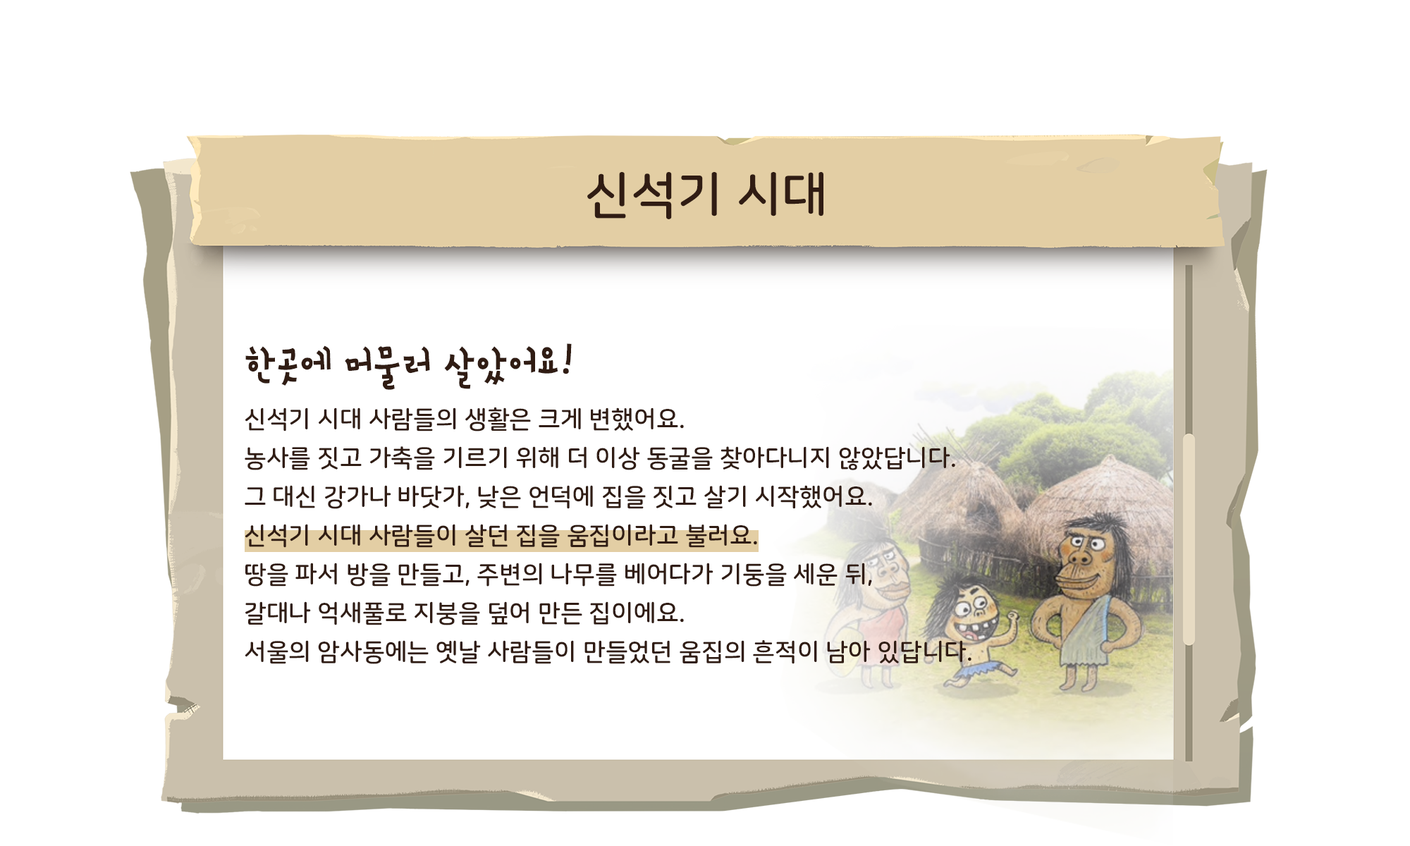
<style>
.page{position:relative;width:1410px;height:846px;background:#ffffff}
.page>*{position:absolute;margin:0}
.t1{font:50.8px "NanumSquareRoundOTFB";color:#301c13}
.t2{font:24.7px/38.8px "NanumSquareRoundOTFB";color:#301c13}
.t3{font:50.8px/64.8px "SDdBYeonpil-cBd";color:#301c13}
</style>
<div class="page">
<p class="t1" style="left:587px;top:172px;width:236px;height:47px">신석기 시대</p>
<p class="t2" style="left:245px;top:343px;width:726px;height:321px"><span class="t3">한곳에 머물러 살았어요! <br></span>신석기 시대 사람들의 생활은 크게 변했어요. <br>농사를 짓고 가축을 기르기 위해 더 이상 동굴을 찾아다니지 않았답니다. <br>그 대신 강가나 바닷가, 낮은 언덕에 집을 짓고 살기 시작했어요.<br>신석기 시대 사람들이 살던 집을 움집이라고 불러요. <br>땅을 파서 방을 만들고, 주변의 나무를 베어다가 기둥을 세운 뒤,<br>갈대나 억새풀로 지붕을 덮어 만든 집이에요.<br>서울의 암사동에는 옛날 사람들이 만들었던 움집의 흔적이 남아 있답니다.</p>
</div>
